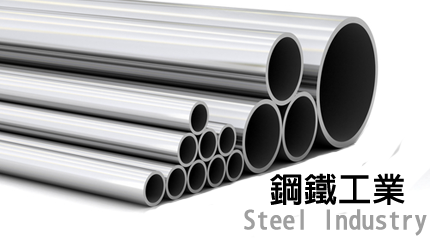
<style>
.page{position:relative;width:430px;height:246px;background:#ffffff}
.page>*{position:absolute;margin:0}
.t1{font:33.3px "AdobeFanHeitiStd-Bold";color:#000000;font-weight:bold}
.t2{font:25px "AdobeFanHeitiStd-Bold";color:#9f9f9f;font-weight:bold}
</style>
<div class="page">
<p class="t1" style="left:270px;top:173px;width:135px;height:32px">鋼鐵工業</p>
<p class="t2" style="left:244px;top:209px;width:183px;height:27px">Steel Industry</p>
</div>
